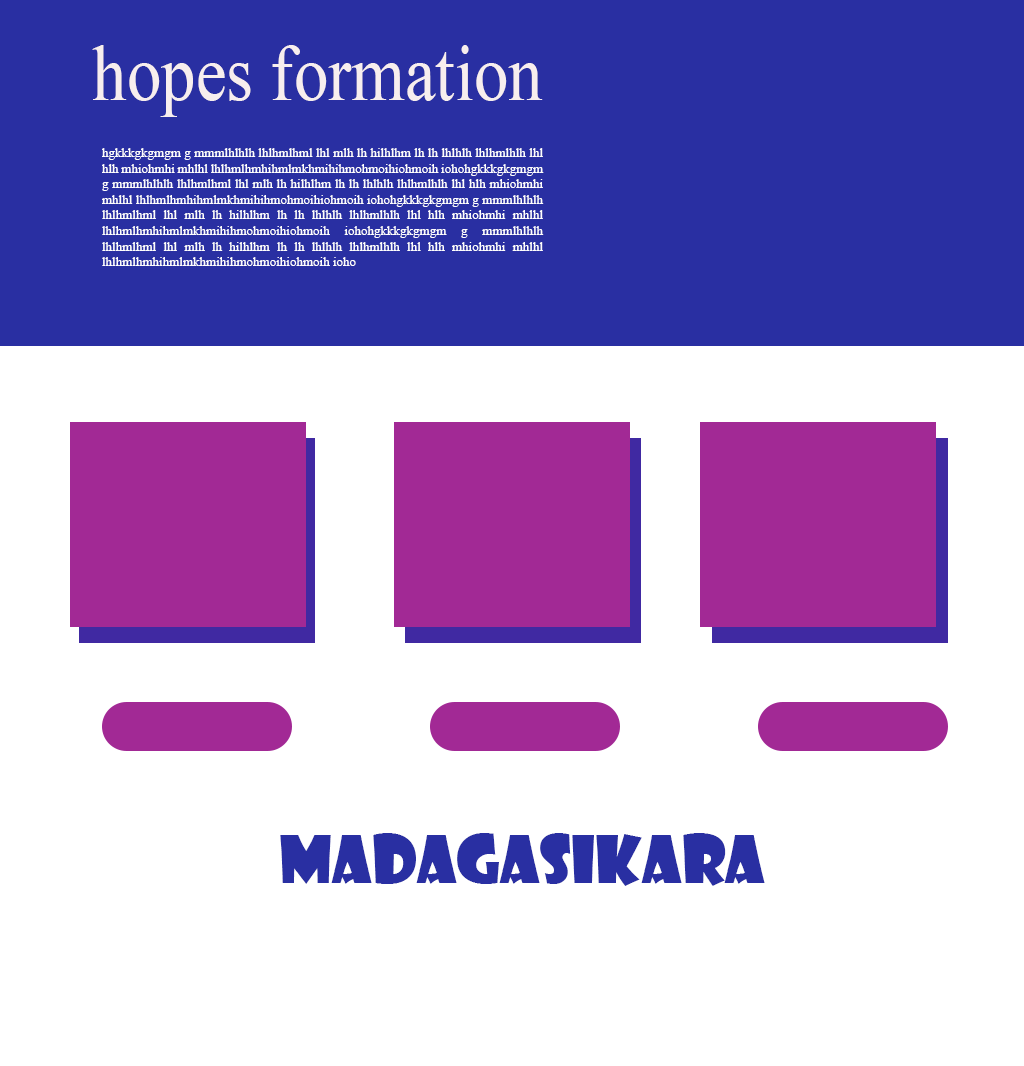
<style>
.page{position:relative;width:1024px;height:1066px;background:#ffffff}
.page>*{position:absolute;margin:0}
.t1{font:79.1px "TimesNewRomanPSMT";color:#f7eeee;scale:0.87 1}
.t2{font:13px "TimesNewRomanPSMT";color:#fefefe}
.t3{font:64px "ShowcardGothic-Reg";color:#292fa2}
</style>
<div class="page">
<p class="t1" style="left:92px;top:45px;width:451px;height:72px">hopes formation</p>
<p class="t2" style="left:102px;top:148px;width:442px;height:118px;text-align:justify">hgkkkgkgmgm g mmmlhlhlh lhlhmlhml lhl mlh lh hilhlhm lh lh lhlhlh lhlhmlhlh lhl hlh mhiohmhi mhlhl lhlhmlhmhihmlmkhmihihmohmoihiohmoih iohohgkkkgkgmgm g mmmlhlhlh lhlhmlhml lhl mlh lh hilhlhm lh lh lhlhlh lhlhmlhlh lhl hlh mhiohmhi mhlhl lhlhmlhmhihmlmkhmihihmohmoihiohmoih iohohgkkkgkgmgm g mmmlhlhlh lhlhmlhml lhl mlh lh hilhlhm lh lh lhlhlh lhlhmlhlh lhl hlh mhiohmhi mhlhl lhlhmlhmhihmlmkhmihihmohmoihiohmoih iohohgkkkgkgmgm g mmmlhlhlh lhlhmlhml lhl mlh lh hilhlhm lh lh lhlhlh lhlhmlhlh lhl hlh mhiohmhi mhlhl lhlhmlhmhihmlmkhmihihmohmoihiohmoih ioho</p>
<p class="t3" style="left:280px;top:833px;width:485px;height:53px">Madagasikara</p>
</div>
